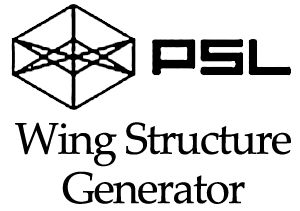
<style>
.page{position:relative;width:300px;height:211px;background:#ffffff}
.page>*{position:absolute;margin:0}
.t1{font:44.4px/49.3px "PalatinoLinotype-Roman";letter-spacing:-0.04em;color:#000000}
</style>
<div class="page">
<p class="t1" style="left:15px;top:122px;width:276px;height:82px;text-align:center">Wing Structure Generator</p>
</div>
